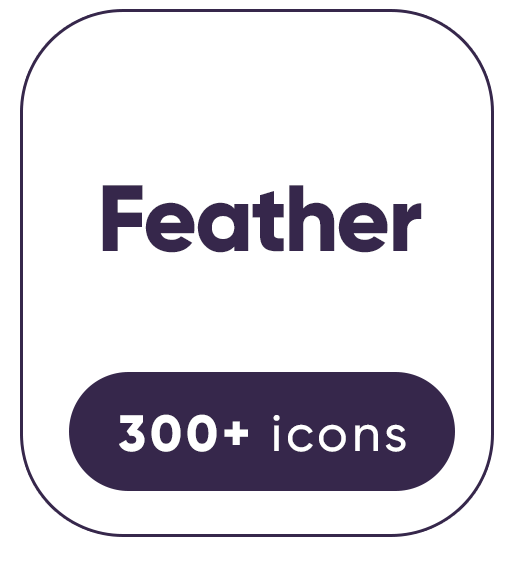
<style>
.page{position:relative;width:521px;height:562px;background:#ffffff}
.page>*{position:absolute;margin:0}
.t1{font:93.8px "Gilroy-ExtraBold";letter-spacing:-0.025em;color:#36274b}
.t2{font:50.9px "Gilroy-Medium";letter-spacing:0.075em;color:#ffffff}
.t3{font:50.9px "Gilroy-ExtraBold";letter-spacing:0.075em;color:#ffffff}
</style>
<div class="page">
<p class="t1" style="left:102px;top:185px;width:320px;height:68px">Feather</p>
<p class="t2" style="left:119px;top:414px;width:287px;height:38px"><span class="t3">300+ </span>icons</p>
</div>
